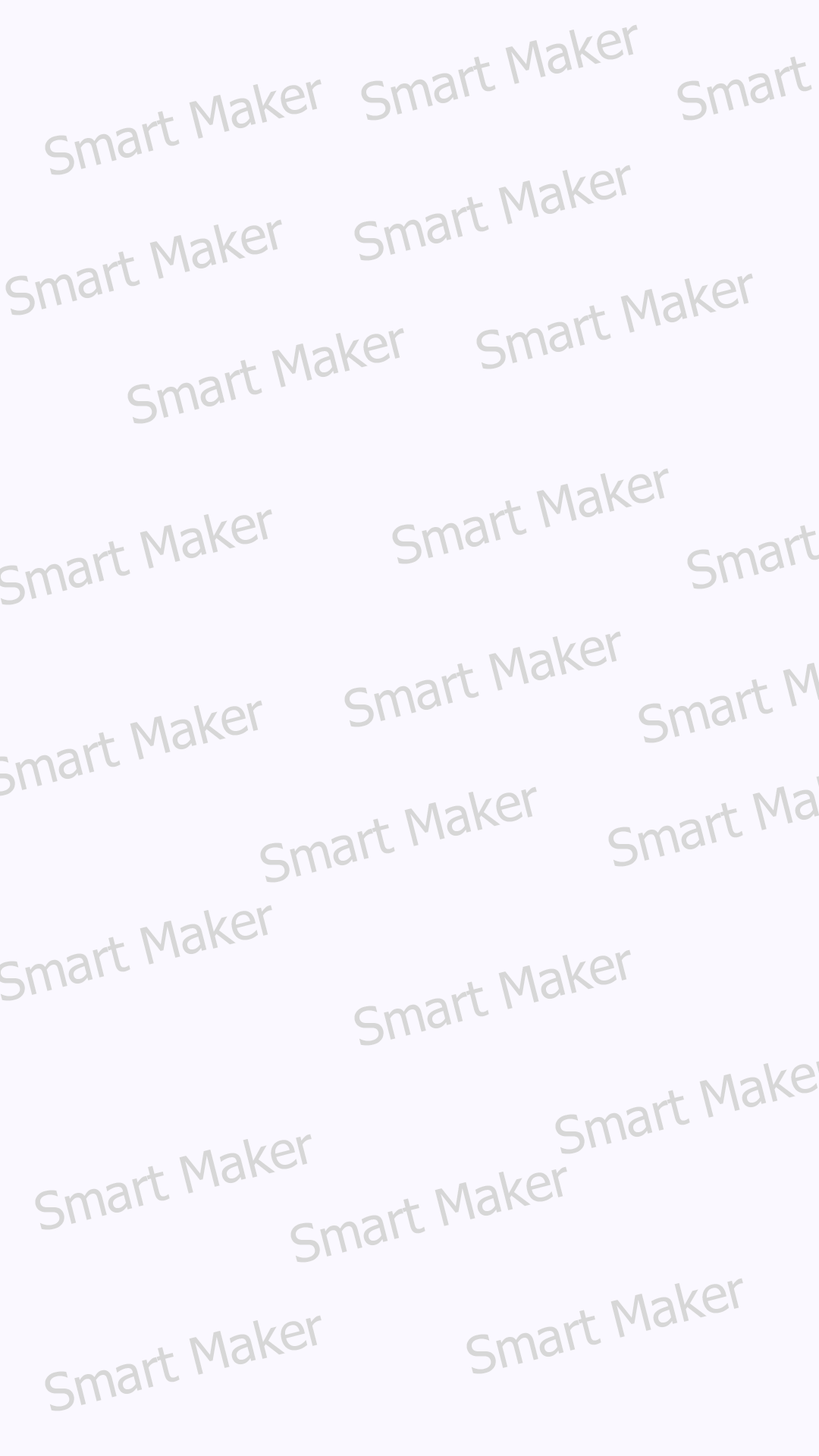
<style>
.page{position:relative;width:819px;height:1456px;background:#faf8ff}
.page>*{position:absolute;margin:0}
.t1{font:51px "Tahoma";color:#d7d7d7}
</style>
<div class="page">
<p class="t1" style="left:361px;top:24px;width:277px;height:97px;rotate:-14deg">Smart Maker</p>
<p class="t1" style="left:45px;top:79px;width:277px;height:96px;rotate:-14deg">Smart Maker</p>
<p class="t1" style="left:354px;top:165px;width:277px;height:96px;rotate:-14deg">Smart Maker</p>
<p class="t1" style="left:5px;top:219px;width:277px;height:96px;rotate:-14deg">Smart Maker</p>
<p class="t1" style="left:476px;top:273px;width:277px;height:96px;rotate:-14deg">Smart Maker</p>
<p class="t1" style="left:127px;top:328px;width:277px;height:96px;rotate:-14deg">Smart Maker</p>
<p class="t1" style="left:392px;top:468px;width:277px;height:96px;rotate:-14deg">Smart Maker</p>
<p class="t1" style="left:344px;top:631px;width:277px;height:96px;rotate:-14deg">Smart Maker</p>
<p class="t1" style="left:260px;top:786px;width:277px;height:97px;rotate:-14deg">Smart Maker</p>
<p class="t1" style="left:354px;top:949px;width:277px;height:97px;rotate:-14deg">Smart Maker</p>
<p class="t1" style="left:35px;top:1134px;width:277px;height:96px;rotate:-14deg">Smart Maker</p>
<p class="t1" style="left:290px;top:1166px;width:277px;height:97px;rotate:-14deg">Smart Maker</p>
<p class="t1" style="left:466px;top:1278px;width:277px;height:96px;rotate:-14deg">Smart Maker</p>
<p class="t1" style="left:45px;top:1315px;width:277px;height:96px;rotate:-14deg">Smart Maker</p>
</div>
